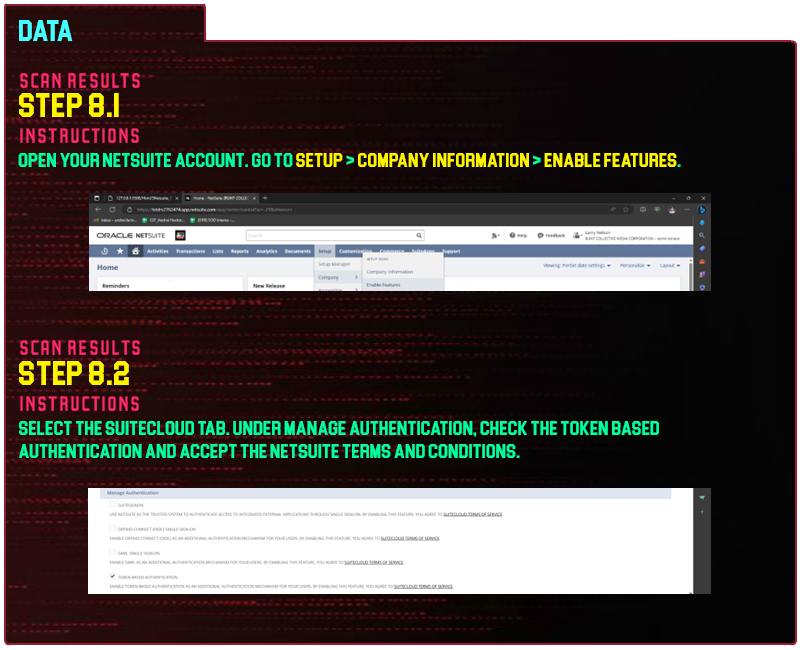
<style>
.page{position:relative;width:800px;height:650px}
.page>*{position:absolute;margin:0}
.t1{font:30px "Blockletter";color:#43ffff}
.t2{font:35px "Party-Lights-[WLM]-Flat";color:#ff296d}
.t3{font:35px "Blockletter";color:#fdf500}
.t4{font:20px "Blockletter";color:#00ff9f}
.t5{font:20px "Blockletter";color:#fdf500}
.t6{font:34.9px "Party-Lights-[WLM]-Flat";color:#ff296d}
.t7{font:34.9px "Blockletter";color:#fdf500}
.t8{font:19.9px "Blockletter";color:#00ff9f}
</style>
<div class="page">
<p class="t1" style="left:19px;top:20px;width:54px;height:21px">Data</p>
<p class="t2" style="left:20px;top:73px;width:120px;height:15px">Scan REsults</p>
<p class="t3" style="left:19px;top:93px;width:100px;height:24px">Step 8.1</p>
<p class="t2" style="left:20px;top:128px;width:119px;height:15px">instructions</p>
<p class="t4" style="left:18px;top:153px;width:663px;height:14px">open your netsuite account. Go to<span class="t5"> SETUP</span> &gt; <span class="t5">COMPANY INFORMATION</span> &gt; <span class="t5">ENABLE FEATURES</span>.</p>
<p class="t6" style="left:20px;top:340px;width:120px;height:15px">Scan REsults</p>
<p class="t7" style="left:19px;top:361px;width:110px;height:24px">Step 8.2</p>
<p class="t6" style="left:20px;top:396px;width:119px;height:15px">instructions</p>
<p class="t8" style="left:19px;top:421px;width:640px;height:37px">select the suitecloud tab. Under manage authentication, Check the Token based authentication and accept the netsuite terms and conditions.</p>
</div>
